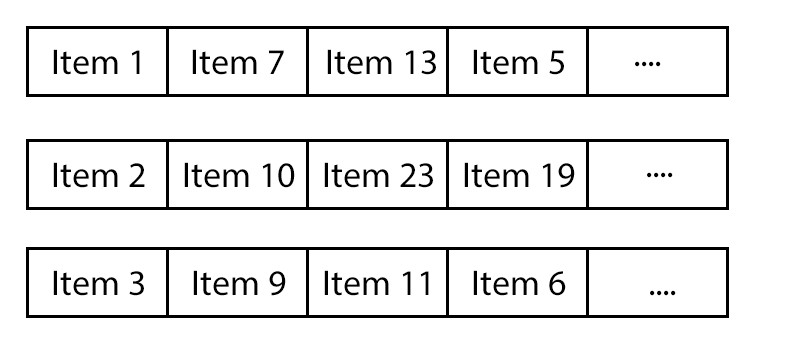
<style>
.page{position:relative;width:800px;height:360px;background:#ffffff}
.page>*{position:absolute;margin:0}
.t1{font:36px "MyriadPro-Regular";color:#000000}
</style>
<div class="page">
<p class="t1" style="left:53px;top:49px;width:87px;height:26px">Item 1</p>
<p class="t1" style="left:192px;top:49px;width:92px;height:26px">Item 7</p>
<p class="t1" style="left:327px;top:49px;width:109px;height:26px">Item 13</p>
<p class="t1" style="left:473px;top:49px;width:91px;height:26px">Item 5</p>
<p class="t1" style="left:635px;top:61px;width:26px;height:6px">....</p>
<p class="t1" style="left:53px;top:162px;width:92px;height:26px">Item 2</p>
<p class="t1" style="left:184px;top:162px;width:111px;height:26px">Item 10</p>
<p class="t1" style="left:324px;top:162px;width:109px;height:26px">Item 23</p>
<p class="t1" style="left:464px;top:162px;width:111px;height:26px">Item 19</p>
<p class="t1" style="left:647px;top:172px;width:26px;height:6px">....</p>
<p class="t1" style="left:53px;top:270px;width:91px;height:26px">Item 3</p>
<p class="t1" style="left:193px;top:270px;width:93px;height:26px">Item 9</p>
<p class="t1" style="left:324px;top:270px;width:105px;height:26px">Item 11</p>
<p class="t1" style="left:473px;top:270px;width:93px;height:26px">Item 6</p>
<p class="t1" style="left:650px;top:290px;width:26px;height:6px">....</p>
</div>
